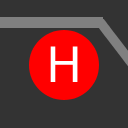
<style>
.page{position:relative;width:128px;height:128px;background:#333333}
.page>*{position:absolute;margin:0}
.t1{font:51px "AlibabaPuHuiTi-Regular";color:#ffffff}
</style>
<div class="page">
<p class="t1" style="left:50px;top:46px;width:28px;height:36px">H</p>
</div>
